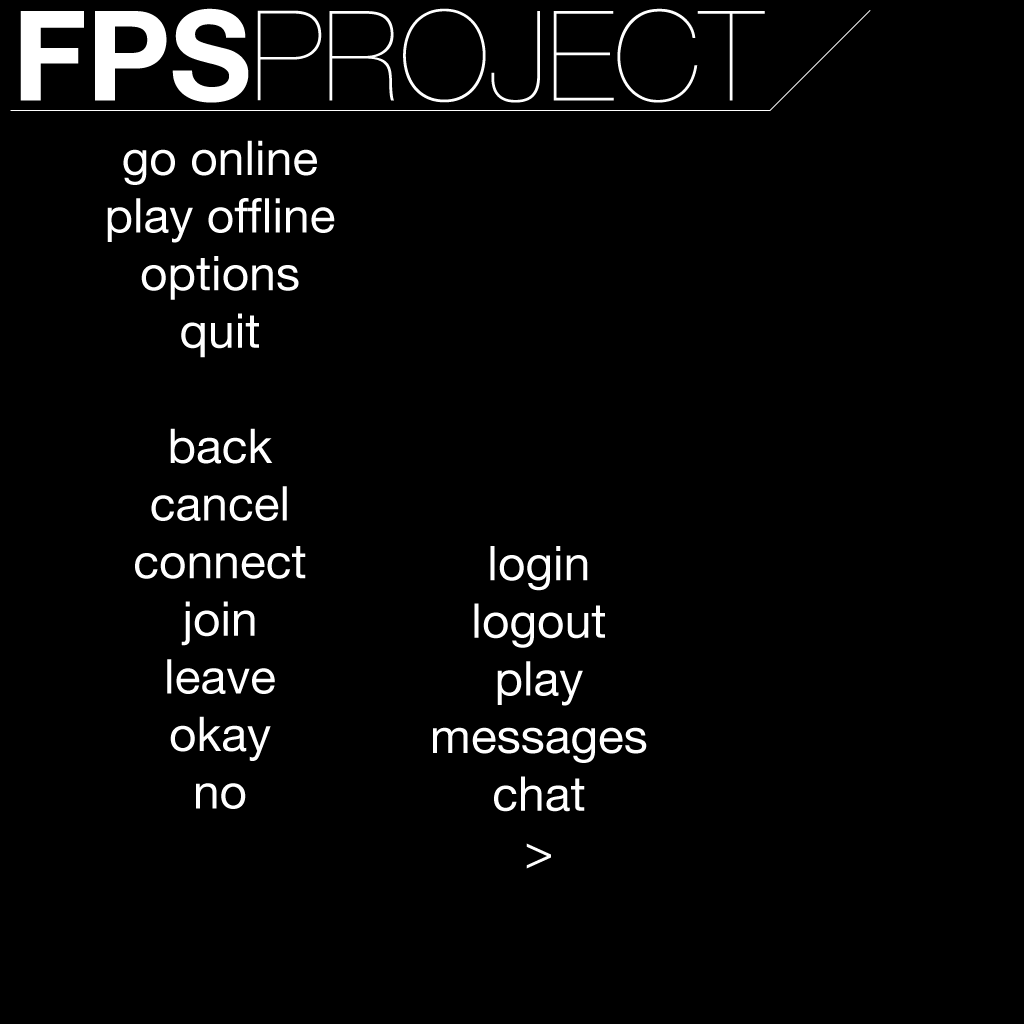
<style>
.page{position:relative;width:1024px;height:1024px;background:#000000}
.page>*{position:absolute;margin:0}
.t1{font:125px "HelveticaNeue-UltraLight";color:#ffffff}
.t2{font:125px "HelveticaNeue-Bold";color:#ffffff}
.t3{font:48px "HelveticaNeue";color:#ffffff}
</style>
<div class="page">
<p class="t1" style="left:20px;top:8px;width:745px;height:95px"><span class="t2">FPS</span>PROJECT</p>
<p class="t3" style="left:107px;top:140px;width:228px;height:669px;text-align:center">go online<br>play offline<br>options<br>quit<br><br>back<br>cancel<br>connect<br>join<br>leave<br>okay<br>no</p>
<p class="t3" style="left:433px;top:546px;width:214px;height:323px;text-align:center">login<br>logout<br>play<br>messages<br>chat<br>&gt;</p>
</div>
